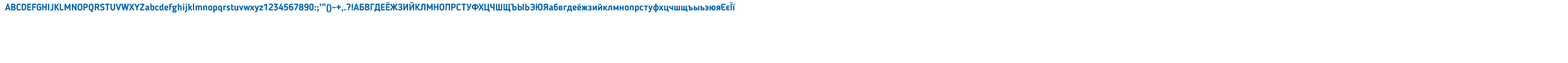
<style>
.page{position:relative;width:1568px;height:63px;background:#ffffff}
.page>*{position:absolute;margin:0}
.t1{font:9.4px "BloggerSans-Bold";color:#0968b1}
</style>
<div class="page">
<p class="t1" style="left:5px;top:2px;width:730px;height:11px">ABCDEFGHIJKLMNOPQRSTUVWXYZabcdefghijklmnopqrstuvwxyz1234567890:;’”()-+,.?!АБВГДЕЁЖЗИЙКЛМНОПРСТУФХЦЧШЩЪЫЬЭЮЯабвгдеёжзийклмнопрстуфхцчшщъыьэюяЄєЇї</p>
</div>
